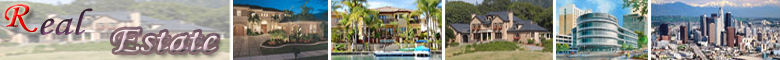
<style>
.page{position:relative;width:780px;height:60px}
.page>*{position:absolute;margin:0}
.t1{font:37.5px "MonotypeCorsiva";scale:1.2 1}
</style>
<div class="page">
<p class="t1" style="left:4px;top:4px;width:34px;height:28px">R</p>
<p class="t1" style="left:40px;top:8px;width:53px;height:27px">eal</p>
<p class="t1" style="left:112px;top:29px;width:106px;height:23px">Estate</p>
</div>
